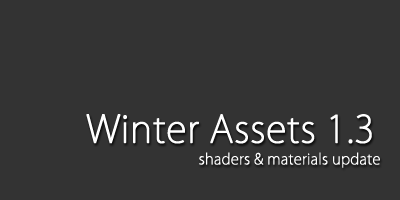
<style>
.page{position:relative;width:400px;height:200px;background:#333333}
.page>*{position:absolute;margin:0}
.t1{font:36.9px "KozGoPr6N-ExtraLight";color:#ffffff;font-weight:bold}
.t2{font:14.6px "KozGoPr6N-ExtraLight";color:#ffffff;font-weight:bold}
</style>
<div class="page">
<p class="t1" style="left:86px;top:114px;width:286px;height:30px">Winter Assets 1.3</p>
<p class="t2" style="left:199px;top:152px;width:181px;height:16px">shaders &amp; materials update</p>
</div>
